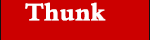
<style>
.page{position:relative;width:150px;height:40px;background:#cc0000}
.page>*{position:absolute;margin:0}
.t1{font:26px "FZDBSFW--GB1-0";color:#ffffff;font-weight:bold}
</style>
<div class="page">
<p class="t1" style="left:25px;top:2px;width:81px;height:19px">Thunk</p>
</div>
